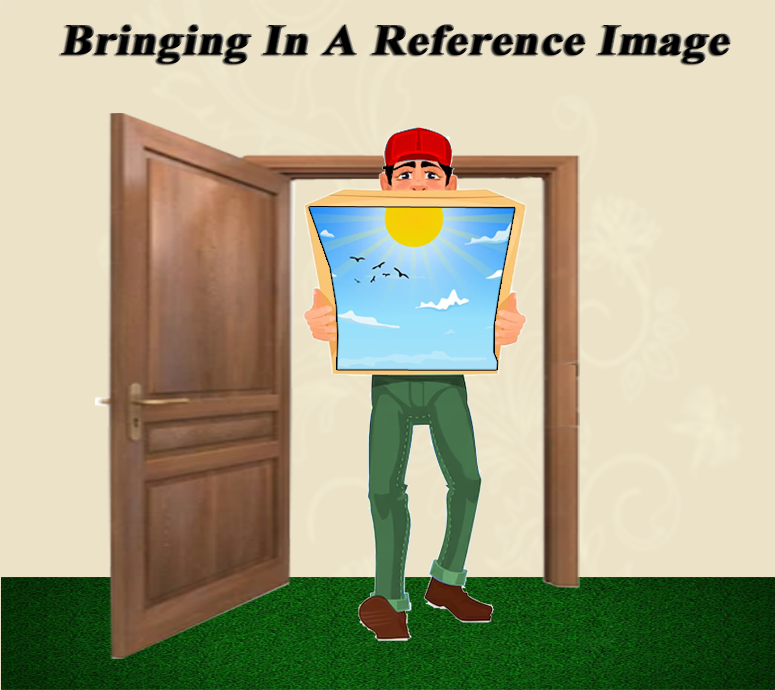
<style>
.page{position:relative;width:775px;height:690px;background:#ebe2c8}
.page>*{position:absolute;margin:0}
.t1{font:43.7px "TimesNewRomanPS-BoldMT";color:#000000;font-weight:bold;font-style:italic;scale:1.08 1}
</style>
<div class="page">
<p class="t1" style="left:61px;top:24px;width:670px;height:40px">Bringing In A Reference Image</p>
</div>
